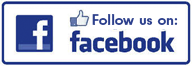
<style>
.page{position:relative;width:192px;height:66px;background:#ffffff}
.page>*{position:absolute;margin:0}
.t1{font:15px "NeuzeitGro-Bol";color:#2c408e}
</style>
<div class="page">
<p class="t1" style="left:92px;top:14px;width:86px;height:11px">Follow us on:</p>
</div>
